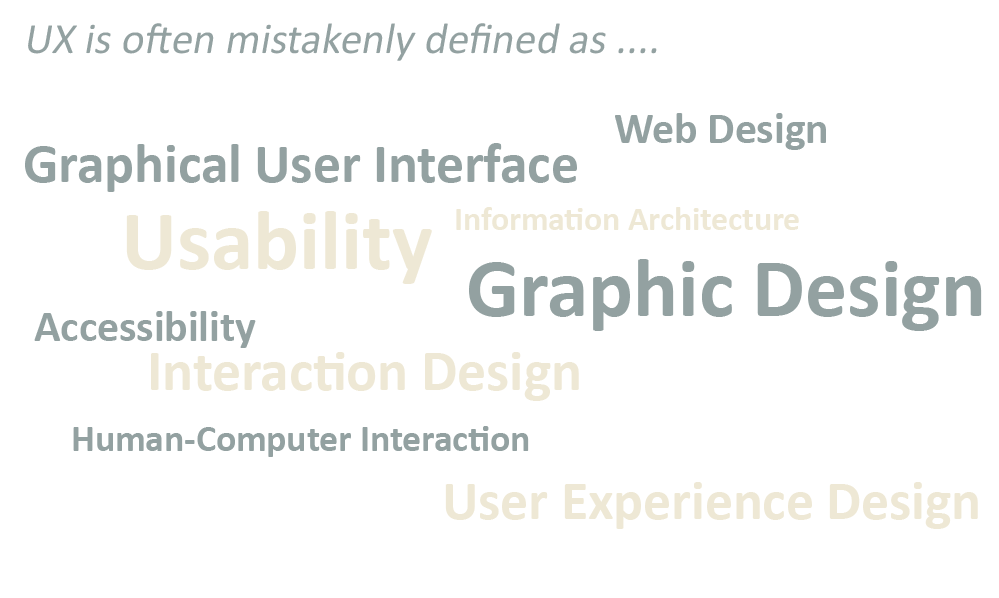
<style>
.page{position:relative;width:999px;height:598px;background:#ffffff}
.page>*{position:absolute;margin:0}
.t1{font:43.6px "Calibri";color:#93a1a1;font-style:italic}
.t2{font:43.6px "Calibri-Bold";color:#93a1a1}
.t3{font:55.6px "Calibri-Bold";color:#93a1a1}
.t4{font:33.6px "Calibri-Bold";color:#eee8d5}
.t5{font:85.6px "Calibri-Bold";color:#eee8d5}
.t6{font:83.6px "Calibri-Bold";color:#93a1a1}
.t7{font:57.6px "Calibri-Bold";color:#eee8d5}
.t8{font:37.6px "Calibri-Bold";color:#93a1a1}
.t9{font:55.6px "Calibri-Bold";color:#eee8d5}
</style>
<div class="page">
<p class="t1" style="left:28px;top:23px;width:629px;height:38px">UX is often mistakenly defined as ....</p>
<p class="t2" style="left:615px;top:113px;width:211px;height:37px">Web Design</p>
<p class="t3" style="left:25px;top:143px;width:552px;height:49px">Graphical User Interface</p>
<p class="t4" style="left:456px;top:207px;width:343px;height:23px">Information Architecture</p>
<p class="t5" style="left:126px;top:211px;width:306px;height:73px">Usability</p>
<p class="t6" style="left:469px;top:259px;width:513px;height:72px">Graphic Design</p>
<p class="t2" style="left:34px;top:311px;width:222px;height:37px">Accessibility</p>
<p class="t7" style="left:151px;top:352px;width:428px;height:49px">Interaction Design</p>
<p class="t8" style="left:73px;top:426px;width:456px;height:31px">Human-Computer Interaction</p>
<p class="t9" style="left:445px;top:482px;width:533px;height:47px">User Experience Design</p>
</div>
